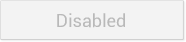
<style>
.page{position:relative;width:186px;height:42px;background:#f3f3f3}
.page>*{position:absolute;margin:0}
.t1{font:18px "Roboto-Regular";color:#b9b9b9}
</style>
<div class="page">
<p class="t1" style="left:57px;top:13px;width:68px;height:15px">Disabled</p>
</div>
